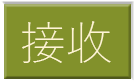
<style>
.page{position:relative;width:134px;height:82px;background:#82912b}
.page>*{position:absolute;margin:0}
.t1{font:45.8px "YuGothicUI-Light";color:#fff5d3}
</style>
<div class="page">
<p class="t1" style="left:22px;top:21px;width:89px;height:42px">接收</p>
</div>
